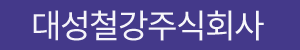
<style>
.page{position:relative;width:300px;height:50px;background:#44398a}
.page>*{position:absolute;margin:0}
.t1{font:33.3px "NotoSansMonoCJKkr-Regular";letter-spacing:-0.05em;color:#f5f4f9;text-transform:uppercase}
.t2{font:33.3px "NotoSansMonoCJKkr-Regular";letter-spacing:-0.05em;color:#f7f7fa;text-transform:uppercase}
</style>
<div class="page">
<p class="t1" style="left:33px;top:10px;width:231px;height:31px">대성철강<span class="t2">주식회사</span></p>
</div>
